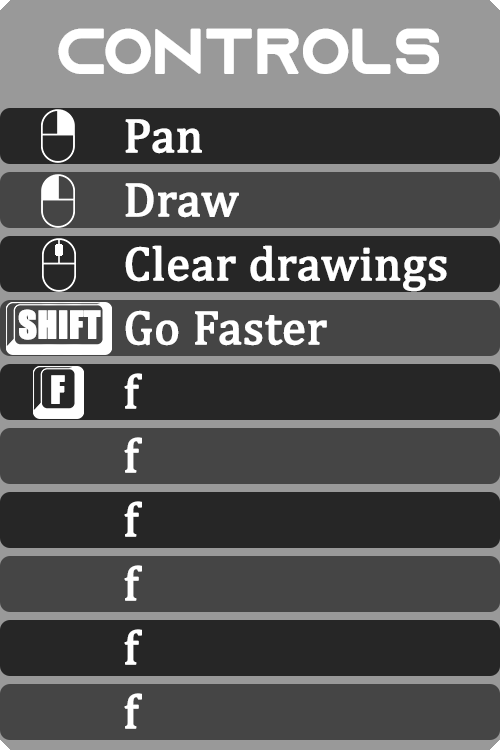
<style>
.page{position:relative;width:500px;height:750px;background:#262626}
.page>*{position:absolute;margin:0}
.t1{font:61.9px "AzonixRegular";color:#ffffff;font-weight:bold}
.t2{font:48px/32px "Cambria";color:#ffffff;font-weight:bold}
.t3{font:35.1px "Impact";color:#ffffff;font-weight:bold}
</style>
<div class="page">
<p class="t1" style="left:58px;top:28px;width:381px;height:46px">CONTROLS</p>
<p class="t2" style="left:124px;top:119px;width:323px;height:610px">Pan<br><br>Draw<br><br>Clear drawings<br><br>Go Faster<br><br>f<br><br>f<br><br>f<br><br>f<br><br>f<br><br>f</p>
<p class="t3" style="left:18px;top:309px;width:83px;height:31px">SHIFT</p>
<p class="t3" style="left:51px;top:375px;width:14px;height:29px">F</p>
</div>
